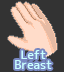
<style>
.page{position:relative;width:64px;height:72px;background:#333333}
.page>*{position:absolute;margin:0}
.t1{font:12px/10px "JK-Gothic-M";color:#c9ffff}
</style>
<div class="page">
<p class="t1" style="left:15px;top:50px;width:37px;height:20px;text-align:center">Left<br>Breast</p>
</div>
